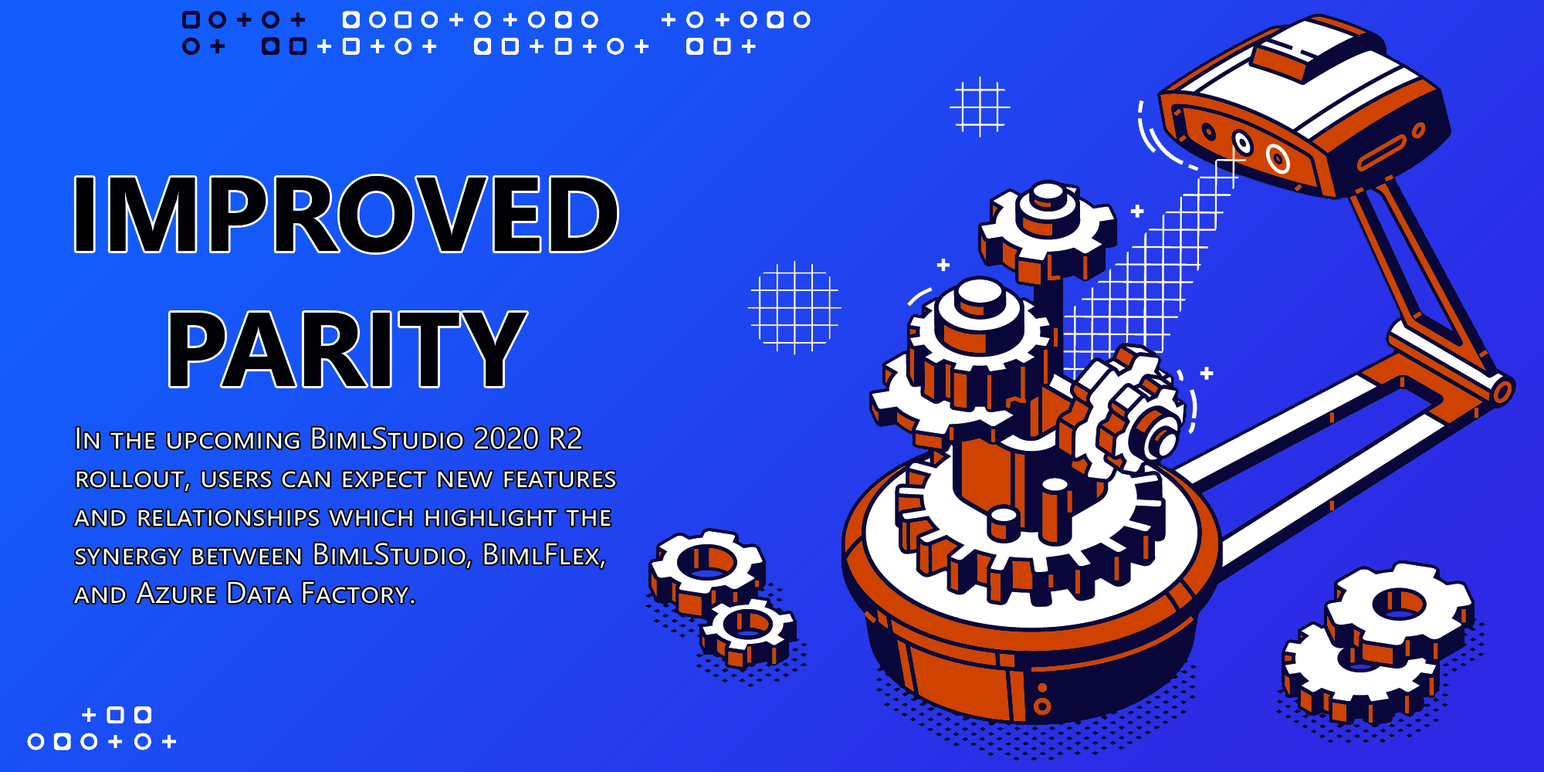
<style>
.page{position:relative;width:1544px;height:772px}
.page>*{position:absolute;margin:0}
.t1{font:104.7px "SegoeUI-Bold";color:#010105;font-variant:small-caps}
.t2{font:29.9px "SegoeUI";letter-spacing:0.01em;color:#feffff;font-variant:small-caps}
</style>
<div class="page">
<p class="t1" style="left:76px;top:176px;width:542px;height:210px;text-align:center">IMPROVED<br>PARITY</p>
<p class="t2" style="left:74px;top:427px;width:541px;height:177px">In the upcoming BimlStudio 2020 R2 rollout, users can expect new features and relationships which highlight the synergy between BimlStudio, BimlFlex, and Azure Data Factory.</p>
</div>
